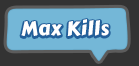
<style>
.page{position:relative;width:139px;height:66px;background:#74b7d7}
.page>*{position:absolute;margin:0}
.t1{font:20px "CarterOne";letter-spacing:0.025em;color:#ffffff}
</style>
<div class="page">
<p class="t1" style="left:21px;top:19px;width:88px;height:17px">Max Kills</p>
</div>
